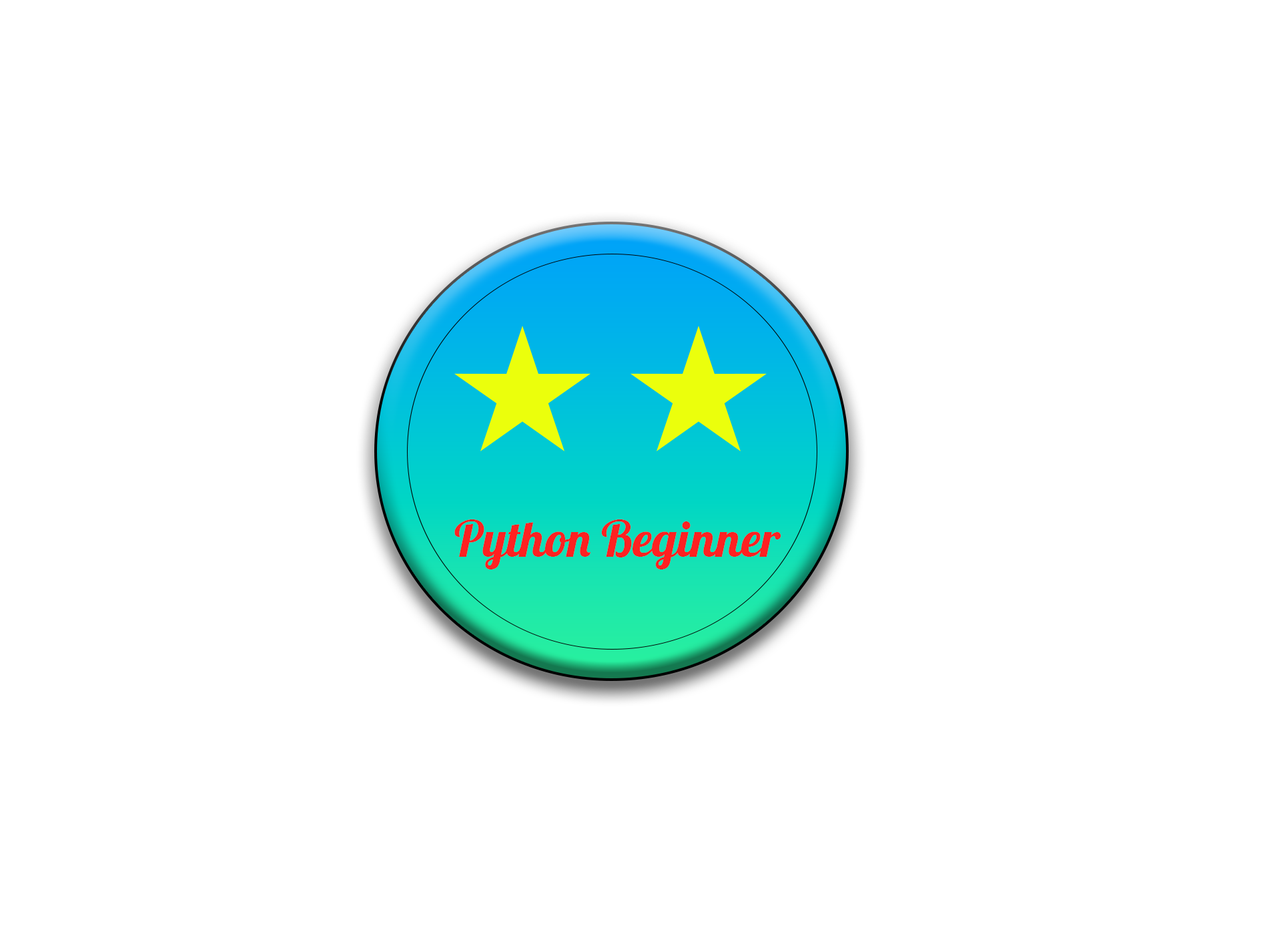
<style>
.page{position:relative;width:1261px;height:946px;background:#ffffff}
.page>*{position:absolute;margin:0}
.t1{font:50px "Lobster-Regular";color:#ff2121}
</style>
<div class="page">
<p class="t1" style="left:454px;top:519px;width:327px;height:50px">Python Beginner</p>
</div>
